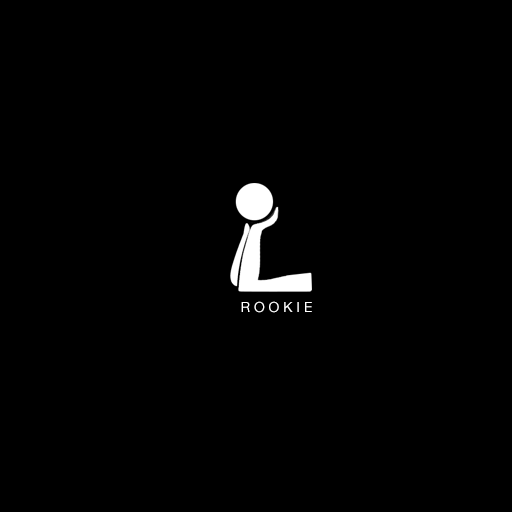
<style>
.page{position:relative;width:512px;height:512px;background:#000000}
.page>*{position:absolute;margin:0}
.t1{font:14px "HelveticaNeue";color:#ffffff}
</style>
<div class="page">
<p class="t1" style="left:241px;top:301px;width:71px;height:12px">R O O K I E</p>
</div>
